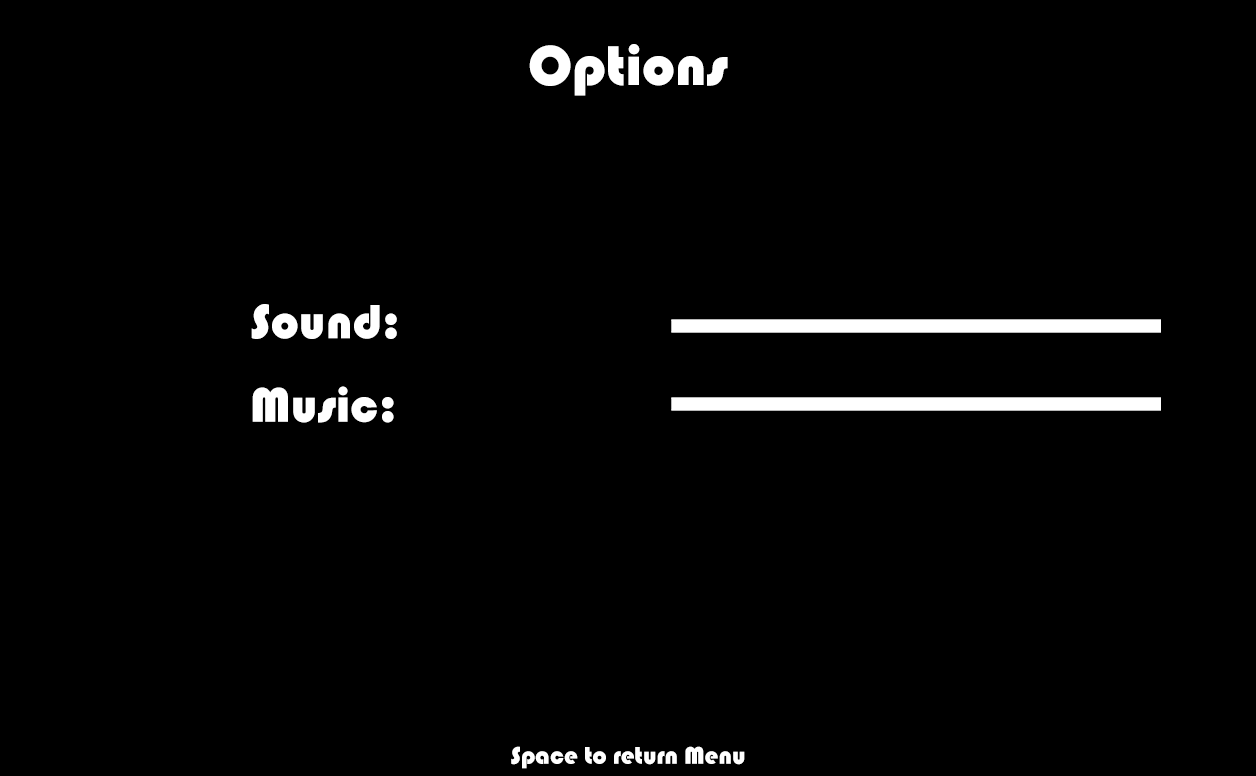
<style>
.page{position:relative;width:1256px;height:776px;background:#000000}
.page>*{position:absolute;margin:0}
.t1{font:58.3px "Bauhaus93";color:#ffffff}
.t2{font:50px/83.3px "Bauhaus93";color:#ffffff}
.t3{font:25px "Bauhaus93";color:#ffffff}
</style>
<div class="page">
<p class="t1" style="left:529px;top:44px;width:199px;height:52px">Options</p>
<p class="t2" style="left:251px;top:304px;width:146px;height:119px">Sound:<br>Music:</p>
<p class="t3" style="left:511px;top:746px;width:234px;height:23px">Space to return Menu</p>
</div>
